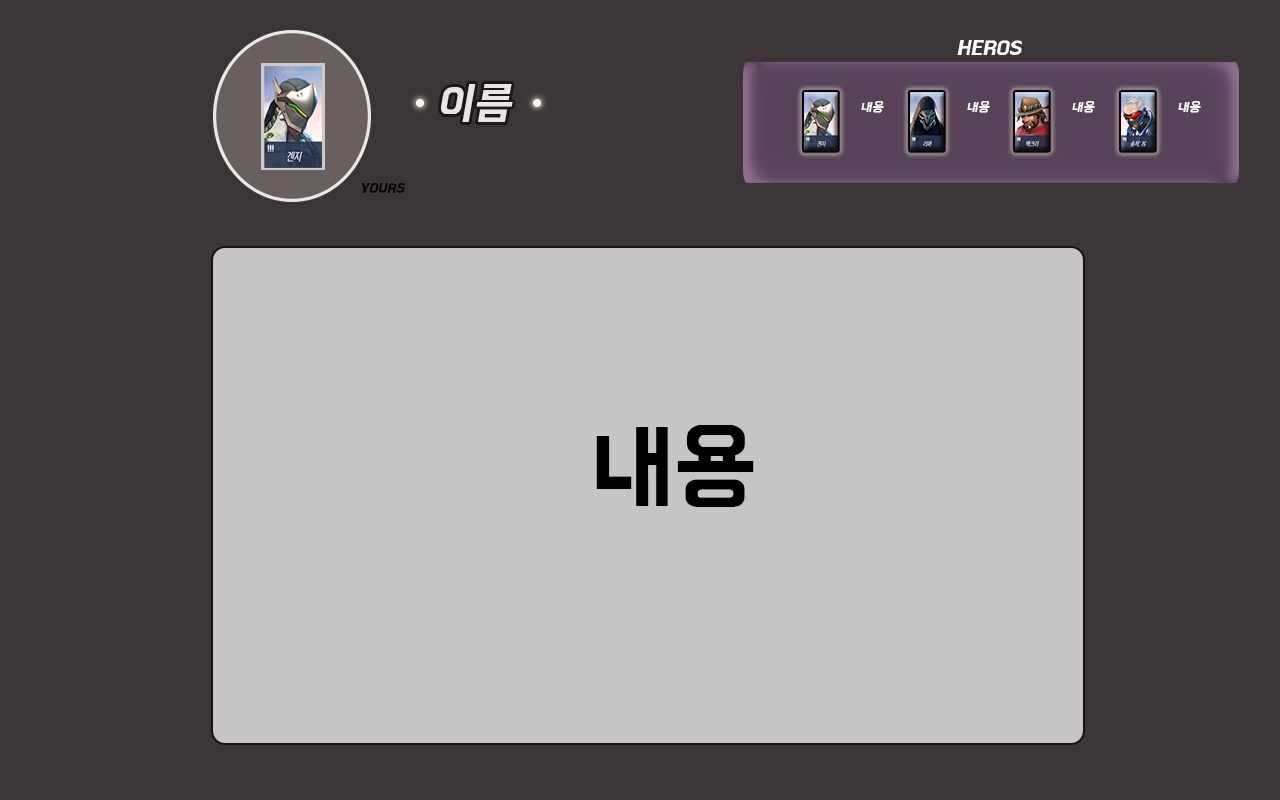
<style>
.page{position:relative;width:1280px;height:800px;background:#3b3537}
.page>*{position:absolute;margin:0}
.t1{font:20px "BMHANNA11yrsold";color:#fefcfc;font-style:italic}
.t2{font:45.1px "BMHANNA11yrsold";color:#e8e6e4;font-style:italic}
.t3{font:13.3px "BMHANNA11yrsold";color:#fefcfc;font-style:italic}
.t4{font:13.3px "BMHANNA11yrsold";color:#050404;font-style:italic}
.t5{font:96px "BMHANNA11yrsold";color:#000000}
</style>
<div class="page">
<p class="t1" style="left:957px;top:40px;width:65px;height:15px">HEROS</p>
<p class="t2" style="left:441px;top:84px;width:72px;height:38px">이름</p>
<p class="t3" style="left:861px;top:101px;width:23px;height:12px">내용</p>
<p class="t3" style="left:967px;top:101px;width:23px;height:12px">내용</p>
<p class="t3" style="left:1072px;top:101px;width:23px;height:12px">내용</p>
<p class="t3" style="left:1178px;top:101px;width:23px;height:12px">내용</p>
<p class="t4" style="left:361px;top:182px;width:44px;height:11px">YOURS</p>
<p class="t5" style="left:596px;top:425px;width:158px;height:82px">내용</p>
</div>
